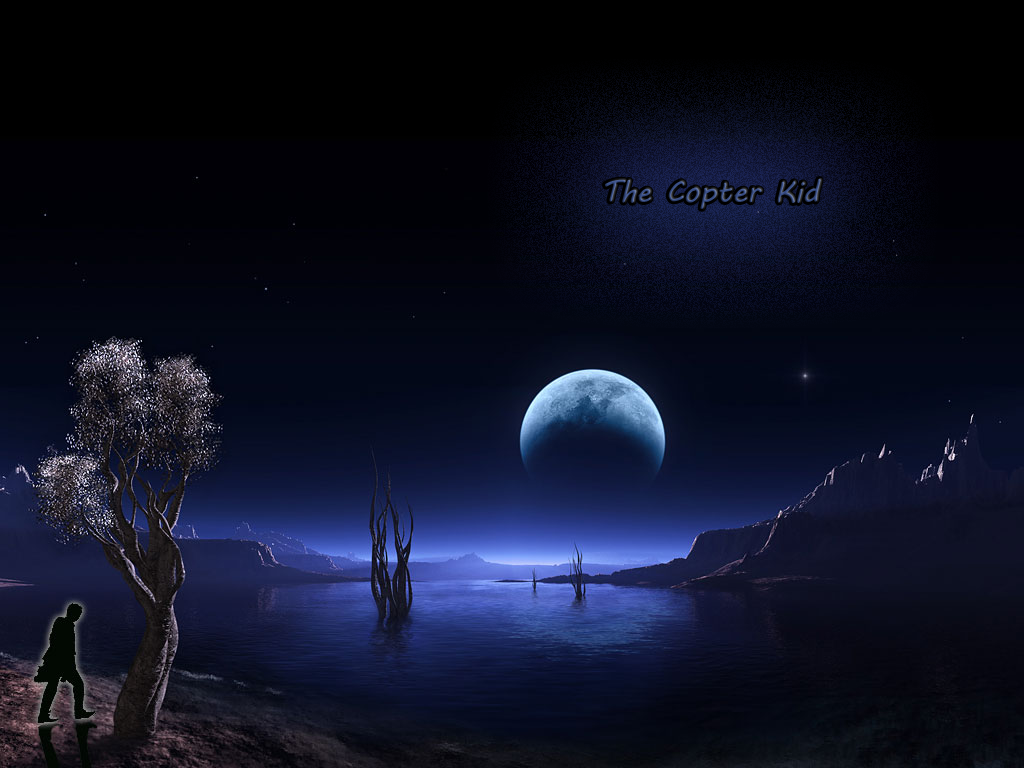
<style>
.page{position:relative;width:1024px;height:768px}
.page>*{position:absolute;margin:0}
.t1{font:30px "MVBoli"}
</style>
<div class="page">
<p class="t1" style="left:605px;top:179px;width:216px;height:30px">The Copter Kid</p>
</div>
